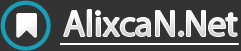
<style>
.page{position:relative;width:241px;height:51px;background:#333333}
.page>*{position:absolute;margin:0}
.t1{font:36.4px "MyriadPro-Regular";color:#e2e2e2}
</style>
<div class="page">
<p class="t1" style="left:64px;top:10px;width:173px;height:26px">AlixcaN.Net</p>
</div>
